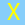
<style>
.page{position:relative;width:25px;height:25px;background:#87cefa}
.page>*{position:absolute;margin:0}
.t1{font:24px "MyriadPro-Regular";color:#ffff00}
</style>
<div class="page">
<p class="t1" style="left:7px;top:3px;width:13px;height:17px">X</p>
</div>
